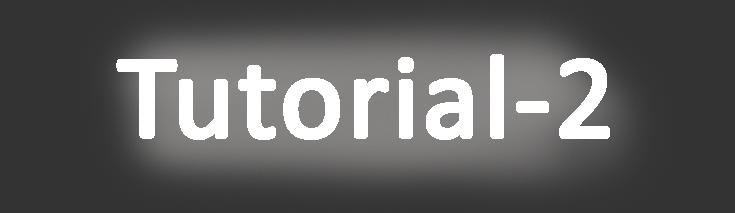
<style>
.page{position:relative;width:735px;height:213px;background:#333333}
.page>*{position:absolute;margin:0}
.t1{font:120px "Calibri";color:#ffffff;font-weight:bold}
</style>
<div class="page">
<p class="t1" style="left:116px;top:54px;width:494px;height:86px">Tutorial-2</p>
</div>
